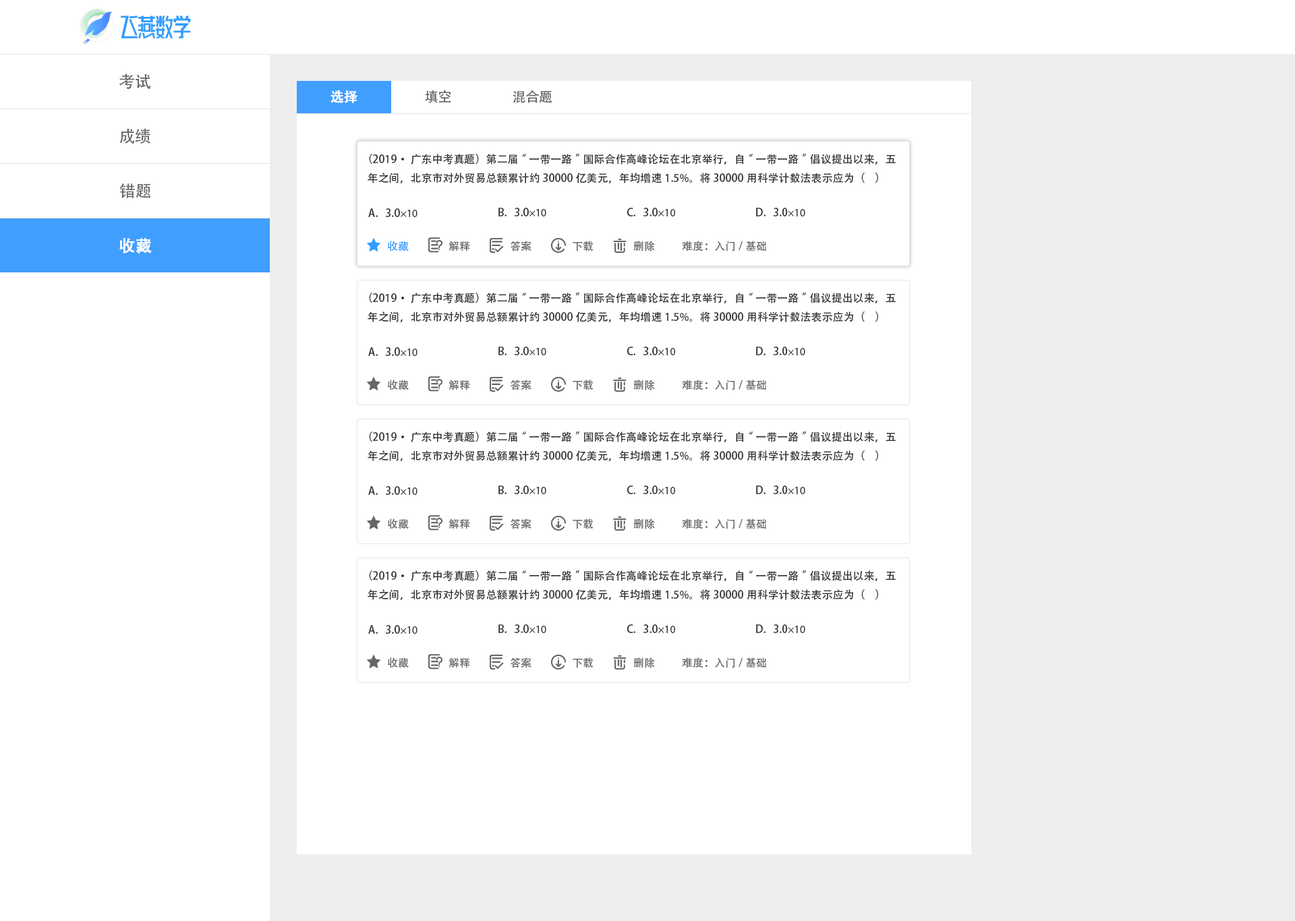
<style>
.page{position:relative;width:1295px;height:921px;background:#ffffff}
.page>*{position:absolute;margin:0}
.t1{font:16.2px "AdobeHeitiStd-Regular";color:#666666}
.t2{font:13.5px "AdobeHeitiStd-Regular";color:#ffffff;font-weight:bold}
.t3{font:13.5px "AdobeHeitiStd-Regular";color:#666666}
.t4{font:10.8px "AdobeHeitiStd-Regular";color:#333333}
.t5{font:10.8px "MyriadPro-Regular";color:#333333}
.t6{font:16.2px "AdobeHeitiStd-Regular";color:#ffffff;font-weight:bold}
.t7{font:10.8px "AdobeHeitiStd-Regular";color:#339dff}
.t8{font:10.8px "AdobeHeitiStd-Regular";color:#666666}
</style>
<div class="page">
<p class="t1" style="left:119px;top:73px;width:32px;height:16px">考试</p>
<p class="t2" style="left:330px;top:90px;width:27px;height:13px">选择</p>
<p class="t3" style="left:425px;top:90px;width:26px;height:13px">填空</p>
<p class="t3" style="left:512px;top:90px;width:40px;height:13px">混合题</p>
<p class="t1" style="left:119px;top:128px;width:31px;height:16px">成绩</p>
<p class="t4" style="left:367px;top:154px;width:528px;height:29px">（2019·广东中考真题）第二届“一带一路”国际合作高峰论坛在北京举行，自“一带一路”倡议提出以来，五年之间，北京市对外贸易总额累计约30000亿美元，年均增速1.5%。将30000用科学计数法表示应为（    ）</p>
<p class="t1" style="left:119px;top:183px;width:32px;height:15px">错题</p>
<p class="t4" style="left:368px;top:208px;width:49px;height:9px">A.   3.0<span class="t5">×10</span></p>
<p class="t4" style="left:498px;top:208px;width:48px;height:8px">B.   3.0<span class="t5">×10</span></p>
<p class="t4" style="left:626px;top:208px;width:49px;height:8px">C.   3.0<span class="t5">×10</span></p>
<p class="t4" style="left:756px;top:208px;width:49px;height:8px">D.   3.0<span class="t5">×10</span></p>
<p class="t6" style="left:119px;top:238px;width:33px;height:16px">收藏</p>
<p class="t7" style="left:388px;top:241px;width:21px;height:11px">收藏</p>
<p class="t8" style="left:448px;top:241px;width:22px;height:11px">解释</p>
<p class="t8" style="left:510px;top:241px;width:21px;height:11px">答案</p>
<p class="t8" style="left:572px;top:241px;width:21px;height:11px">下载</p>
<p class="t8" style="left:633px;top:241px;width:22px;height:11px">删除</p>
<p class="t8" style="left:682px;top:241px;width:84px;height:11px">难度：入门/基础</p>
<p class="t4" style="left:367px;top:293px;width:528px;height:29px">（2019·广东中考真题）第二届“一带一路”国际合作高峰论坛在北京举行，自“一带一路”倡议提出以来，五年之间，北京市对外贸易总额累计约30000亿美元，年均增速1.5%。将30000用科学计数法表示应为（    ）</p>
<p class="t4" style="left:368px;top:347px;width:49px;height:9px">A.   3.0<span class="t5">×10</span></p>
<p class="t4" style="left:498px;top:347px;width:48px;height:8px">B.   3.0<span class="t5">×10</span></p>
<p class="t4" style="left:626px;top:347px;width:49px;height:8px">C.   3.0<span class="t5">×10</span></p>
<p class="t4" style="left:756px;top:347px;width:49px;height:8px">D.   3.0<span class="t5">×10</span></p>
<p class="t8" style="left:388px;top:380px;width:21px;height:10px">收藏</p>
<p class="t8" style="left:448px;top:380px;width:22px;height:10px">解释</p>
<p class="t8" style="left:510px;top:380px;width:21px;height:10px">答案</p>
<p class="t8" style="left:572px;top:380px;width:21px;height:10px">下载</p>
<p class="t8" style="left:633px;top:380px;width:22px;height:10px">删除</p>
<p class="t8" style="left:682px;top:380px;width:84px;height:10px">难度：入门/基础</p>
<p class="t4" style="left:367px;top:432px;width:528px;height:29px">（2019·广东中考真题）第二届“一带一路”国际合作高峰论坛在北京举行，自“一带一路”倡议提出以来，五年之间，北京市对外贸易总额累计约30000亿美元，年均增速1.5%。将30000用科学计数法表示应为（    ）</p>
<p class="t4" style="left:498px;top:485px;width:48px;height:9px">B.   3.0<span class="t5">×10</span></p>
<p class="t4" style="left:626px;top:485px;width:49px;height:9px">C.   3.0<span class="t5">×10</span></p>
<p class="t4" style="left:756px;top:485px;width:49px;height:9px">D.   3.0<span class="t5">×10</span></p>
<p class="t4" style="left:368px;top:486px;width:49px;height:9px">A.   3.0<span class="t5">×10</span></p>
<p class="t8" style="left:388px;top:519px;width:21px;height:10px">收藏</p>
<p class="t8" style="left:448px;top:519px;width:22px;height:10px">解释</p>
<p class="t8" style="left:510px;top:519px;width:21px;height:10px">答案</p>
<p class="t8" style="left:572px;top:519px;width:21px;height:10px">下载</p>
<p class="t8" style="left:633px;top:519px;width:22px;height:10px">删除</p>
<p class="t8" style="left:682px;top:519px;width:84px;height:10px">难度：入门/基础</p>
<p class="t4" style="left:367px;top:570px;width:528px;height:30px">（2019·广东中考真题）第二届“一带一路”国际合作高峰论坛在北京举行，自“一带一路”倡议提出以来，五年之间，北京市对外贸易总额累计约30000亿美元，年均增速1.5%。将30000用科学计数法表示应为（    ）</p>
<p class="t4" style="left:368px;top:625px;width:49px;height:9px">A.   3.0<span class="t5">×10</span></p>
<p class="t4" style="left:498px;top:624px;width:48px;height:9px">B.   3.0<span class="t5">×10</span></p>
<p class="t4" style="left:626px;top:624px;width:49px;height:9px">C.   3.0<span class="t5">×10</span></p>
<p class="t4" style="left:756px;top:624px;width:49px;height:9px">D.   3.0<span class="t5">×10</span></p>
<p class="t8" style="left:388px;top:657px;width:21px;height:11px">收藏</p>
<p class="t8" style="left:448px;top:657px;width:22px;height:11px">解释</p>
<p class="t8" style="left:510px;top:657px;width:21px;height:11px">答案</p>
<p class="t8" style="left:572px;top:657px;width:21px;height:11px">下载</p>
<p class="t8" style="left:633px;top:657px;width:22px;height:11px">删除</p>
<p class="t8" style="left:682px;top:657px;width:84px;height:11px">难度：入门/基础</p>
</div>
